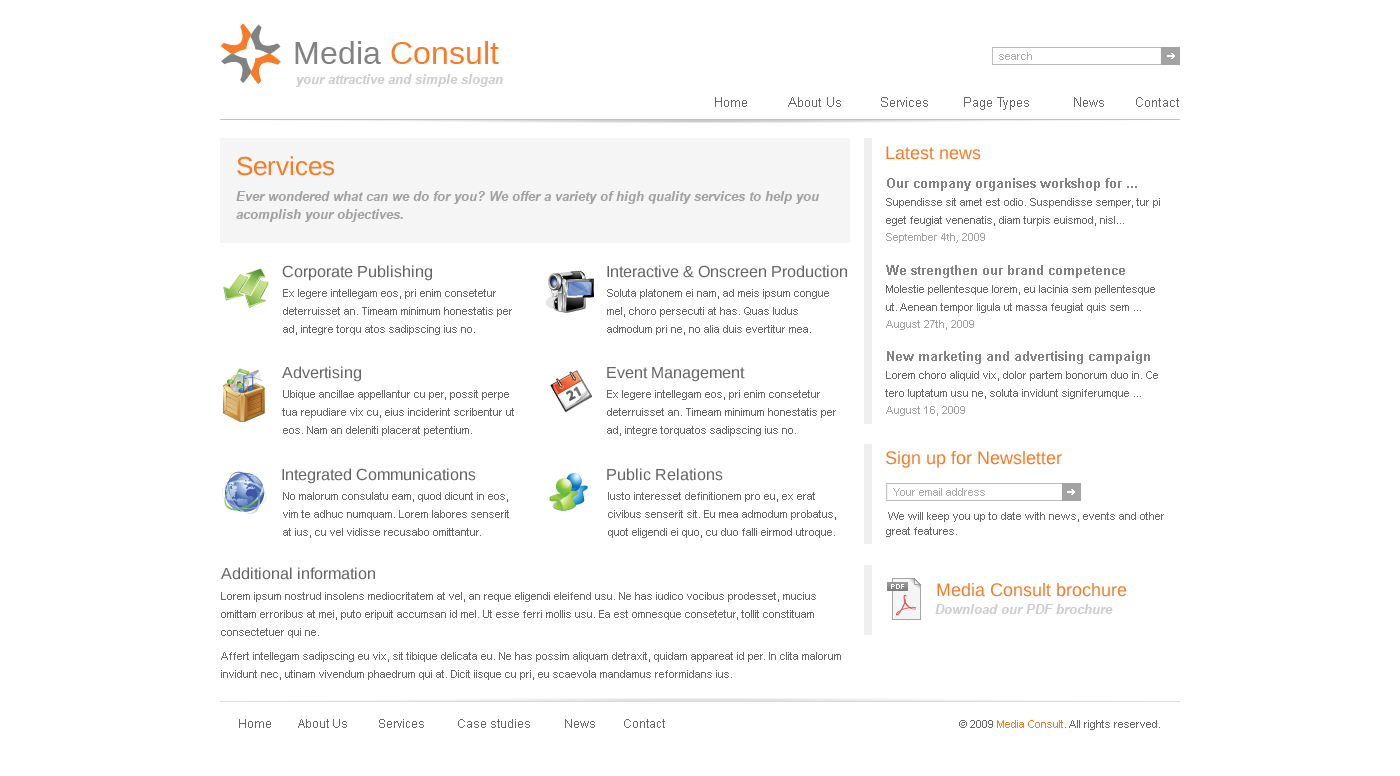
<style>
.page{position:relative;width:1400px;height:776px;background:#ffffff}
.page>*{position:absolute;margin:0}
.t1{font:32px "LiberationSans-Regular";color:#828282}
.t2{font:32px "LiberationSans-Regular";color:#f87b27}
.t3{font:11px "ArialMT";color:#aaaaaa}
.t4{font:13px "Arial-BoldItalicMT";color:#cacaca}
.t5{font:13px "ArialMT";color:#666666}
.t6{font:18px "LiberationSans-Regular";color:#f87b27}
.t7{font:26px "LiberationSans-Regular";color:#f87b27}
.t8{font:13px "Arial-BoldMT";color:#828282}
.t9{font:13px/18px "Arial-BoldItalicMT";color:#a1a1a1}
.t10{font:11px/18px "ArialMT";color:#666666}
.t11{font:11px "LiberationSans-Regular";color:#a1a1a1}
.t12{font:16px "LiberationSans-Regular";color:#666666}
.t13{font:11px "ArialMT";color:#a1a1a1}
.t14{font:11px/18px "LiberationSans-Regular";color:#666666}
.t15{font:11px/15px "ArialMT";color:#666666}
.t16{font:7px "LiberationSans-Regular";letter-spacing:0.06em;color:#ffffff}
.t17{font:7px "LiberationSans-Regular";color:#ffffff}
.t18{font:12px "ArialMT";color:#666666}
.t19{font:11px "ArialMT";color:#666666}
.t20{font:11px "ArialMT";color:#f87b27}
</style>
<div class="page">
<p class="t1" style="left:295px;top:41px;width:86px;height:23px">Media</p>
<p class="t2" style="left:391px;top:41px;width:108px;height:23px">Consult</p>
<p class="t3" style="left:999px;top:52px;width:33px;height:8px">search</p>
<p class="t4" style="left:296px;top:74px;width:207px;height:13px">your attractive and simple slogan</p>
<p class="t5" style="left:715px;top:97px;width:32px;height:10px">Home</p>
<p class="t5" style="left:788px;top:97px;width:53px;height:10px">About Us</p>
<p class="t5" style="left:881px;top:97px;width:47px;height:10px">Services</p>
<p class="t5" style="left:964px;top:97px;width:65px;height:13px">Page Types</p>
<p class="t5" style="left:1074px;top:97px;width:30px;height:10px">News</p>
<p class="t5" style="left:1136px;top:97px;width:43px;height:10px">Contact</p>
<p class="t6" style="left:886px;top:146px;width:95px;height:14px">Latest news</p>
<p class="t7" style="left:237px;top:156px;width:97px;height:20px">Services</p>
<p class="t8" style="left:887px;top:178px;width:250px;height:13px">Our company organises workshop for ...</p>
<p class="t9" style="left:236px;top:191px;width:583px;height:31px">Ever wondered what can we do for you? We offer a variety of high quality services to help you acomplish your objectives.</p>
<p class="t10" style="left:886px;top:198px;width:274px;height:28px">Supendisse sit amet est odio. Suspendisse semper, tur pi eget feugiat venenatis, diam turpis euismod, nisl...</p>
<p class="t11" style="left:886px;top:233px;width:99px;height:10px">September 4th, 2009</p>
<p class="t12" style="left:282px;top:265px;width:150px;height:16px">Corporate Publishing</p>
<p class="t12" style="left:607px;top:265px;width:240px;height:13px">Interactive &amp; Onscreen Production</p>
<p class="t8" style="left:886px;top:265px;width:239px;height:13px">We strengthen our brand competence</p>
<p class="t10" style="left:283px;top:289px;width:229px;height:46px">Ex legere intellegam eos, pri enim consetetur deterruisset an. Timeam minimum honestatis per ad, integre torqu atos sadipscing ius no.</p>
<p class="t10" style="left:607px;top:289px;width:222px;height:46px">Soluta platonem ei nam, ad meis ipsum congue mel, choro persecuti at has. Quas ludus admodum pri ne, no alia duis evertitur mea.</p>
<p class="t10" style="left:886px;top:285px;width:269px;height:28px">Molestie pellentesque lorem, eu lacinia sem pellentesque ut. Aenean tempor ligula ut massa feugiat quis sem ...</p>
<p class="t13" style="left:886px;top:320px;width:88px;height:10px">August 27th, 2009</p>
<p class="t8" style="left:887px;top:351px;width:263px;height:13px">New marketing and advertising campaign</p>
<p class="t12" style="left:282px;top:366px;width:79px;height:16px">Advertising</p>
<p class="t12" style="left:607px;top:367px;width:138px;height:15px">Event Management</p>
<p class="t10" style="left:885px;top:371px;width:273px;height:28px"><span class="t14">L</span>orem choro aliquid vix, dolor partem bonorum duo in. Ce tero luptatum usu ne, soluta invidunt signiferumque ...</p>
<p class="t10" style="left:282px;top:390px;width:232px;height:46px">Ubique ancillae appellantur cu per, possit perpe tua repudiare vix cu, eius inciderint scribentur ut eos. Nam an deleniti placerat petentium.</p>
<p class="t10" style="left:607px;top:390px;width:229px;height:46px">Ex legere intellegam eos, pri enim consetetur deterruisset an. Timeam minimum honestatis per ad, integre torquatos sadipscing ius no.</p>
<p class="t13" style="left:886px;top:406px;width:79px;height:10px">August 16, 2009</p>
<p class="t6" style="left:886px;top:451px;width:176px;height:17px">Sign up for Newsletter</p>
<p class="t12" style="left:282px;top:468px;width:194px;height:16px">Integrated Communications</p>
<p class="t12" style="left:607px;top:468px;width:116px;height:13px">Public Relations</p>
<p class="t10" style="left:283px;top:492px;width:226px;height:46px">No malorum consulatu eam, quod dicunt in eos, vim te adhuc numquam. Lorem labores senserit at ius, cu vel vidisse recusabo omittantur.</p>
<p class="t10" style="left:608px;top:492px;width:228px;height:46px">Iusto interesset definitionem pro eu, ex erat civibus senserit sit. Eu mea admodum probatus, quot eligendi ei quo, cu duo falli eirmod utroque.</p>
<p class="t3" style="left:893px;top:488px;width:92px;height:8px">Your email address</p>
<p class="t15" style="left:886px;top:512px;width:278px;height:25px">We will keep you up to date with news, events and other great features.</p>
<p class="t12" style="left:221px;top:567px;width:154px;height:13px">Additional information</p>
<p class="t10" style="left:221px;top:592px;width:595px;height:46px">Lorem ipsum nostrud insolens mediocritatem at vel, an reque eligendi eleifend usu. Ne has iudico vocibus prodesset, mucius omittam erroribus at mei, puto eripuit accumsan id mel. Ut esse ferri mollis usu. Ea est omnesque consetetur, tollit constituam consectetuer qui ne.</p>
<p class="t16" style="left:891px;top:584px;width:13px;height:5px">PD<span class="t17">F</span></p>
<p class="t6" style="left:937px;top:583px;width:190px;height:14px">Media Consult brochure</p>
<p class="t4" style="left:935px;top:604px;width:178px;height:10px">Download our PDF brochure</p>
<p class="t10" style="left:221px;top:652px;width:620px;height:28px">Affert intellegam sadipscing eu vix, sit tibique delicata eu. Ne has possim aliquam detraxit, quidam appareat id per. In clita malorum invidunt nec, utinam vivendum phaedrum qui at. Dicit iisque cu pri, eu scaevola mandamus reformidans ius.</p>
<p class="t18" style="left:239px;top:719px;width:32px;height:9px">Home</p>
<p class="t18" style="left:298px;top:719px;width:49px;height:9px">About Us</p>
<p class="t18" style="left:379px;top:719px;width:45px;height:9px">Services</p>
<p class="t18" style="left:458px;top:719px;width:72px;height:9px">Case studies</p>
<p class="t18" style="left:565px;top:719px;width:30px;height:9px">News</p>
<p class="t18" style="left:624px;top:719px;width:41px;height:9px">Contact</p>
<p class="t19" style="left:959px;top:720px;width:201px;height:10px">© 2009 Media Consult. All rights reserved.</p>
<p class="t20" style="left:997px;top:720px;width:66px;height:8px">Media Consult</p>
</div>
